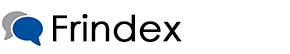
<style>
.page{position:relative;width:290px;height:54px;background:#ffffff}
.page>*{position:absolute;margin:0}
.t1{font:36px "CenturyGothic";letter-spacing:0.005em;color:#000000;font-weight:bold}
</style>
<div class="page">
<p class="t1" style="left:53px;top:14px;width:129px;height:28px">Frindex</p>
</div>
